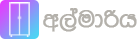
<style>
.page{position:relative;width:139px;height:39px;background:#ffffff}
.page>*{position:absolute;margin:0}
.t1{font:25.5px "4u-Milith-";color:#b4b1ab;font-weight:bold}
</style>
<div class="page">
<p class="t1" style="left:43px;top:8px;width:94px;height:24px">w,audßh</p>
</div>
